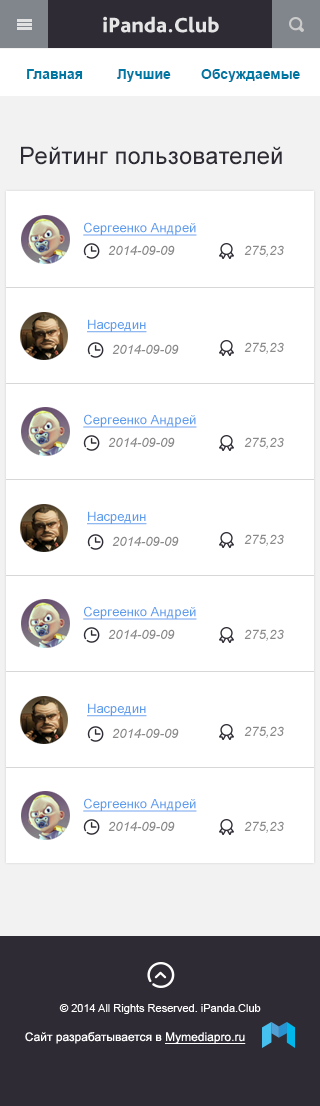
<style>
.page{position:relative;width:320px;height:1106px;background:#ffffff}
.page>*{position:absolute;margin:0}
.t1{font:14px "Arial-BoldMT";color:#0076a3}
.t2{font:24px "ArialMT";color:#2e2b34}
.t3{font:13px "ArialMT";color:#5d9cec;text-decoration:underline}
.t4{font:13px "Arial-ItalicMT";color:#898989}
</style>
<div class="page">
<p class="t1" style="left:27px;top:69px;width:56px;height:10px">Главная</p>
<p class="t1" style="left:117px;top:69px;width:54px;height:13px">Лучшие</p>
<p class="t1" style="left:201px;top:69px;width:99px;height:13px">Обсуждаемые</p>
<p class="t2" style="left:21px;top:146px;width:261px;height:19px">Рейтинг пользователей</p>
<p class="t3" style="left:83px;top:222px;width:114px;height:14px">Сергеенко Андрей</p>
<p class="t4" style="left:108px;top:245px;width:67px;height:10px">2014-09-09</p>
<p class="t4" style="left:244px;top:245px;width:40px;height:12px">275,23</p>
<p class="t3" style="left:87px;top:319px;width:60px;height:14px">Насредин</p>
<p class="t4" style="left:244px;top:342px;width:40px;height:12px">275,23</p>
<p class="t4" style="left:112px;top:344px;width:67px;height:10px">2014-09-09</p>
<p class="t3" style="left:83px;top:414px;width:114px;height:14px">Сергеенко Андрей</p>
<p class="t4" style="left:108px;top:437px;width:67px;height:10px">2014-09-09</p>
<p class="t4" style="left:244px;top:437px;width:40px;height:12px">275,23</p>
<p class="t3" style="left:87px;top:511px;width:60px;height:14px">Насредин</p>
<p class="t4" style="left:244px;top:534px;width:40px;height:12px">275,23</p>
<p class="t4" style="left:112px;top:536px;width:67px;height:10px">2014-09-09</p>
<p class="t3" style="left:83px;top:606px;width:114px;height:14px">Сергеенко Андрей</p>
<p class="t4" style="left:108px;top:629px;width:67px;height:10px">2014-09-09</p>
<p class="t4" style="left:244px;top:629px;width:40px;height:12px">275,23</p>
<p class="t3" style="left:87px;top:703px;width:60px;height:14px">Насредин</p>
<p class="t4" style="left:244px;top:726px;width:40px;height:12px">275,23</p>
<p class="t4" style="left:112px;top:728px;width:67px;height:10px">2014-09-09</p>
<p class="t3" style="left:83px;top:798px;width:114px;height:14px">Сергеенко Андрей</p>
<p class="t4" style="left:108px;top:821px;width:67px;height:10px">2014-09-09</p>
<p class="t4" style="left:244px;top:821px;width:40px;height:12px">275,23</p>
</div>
